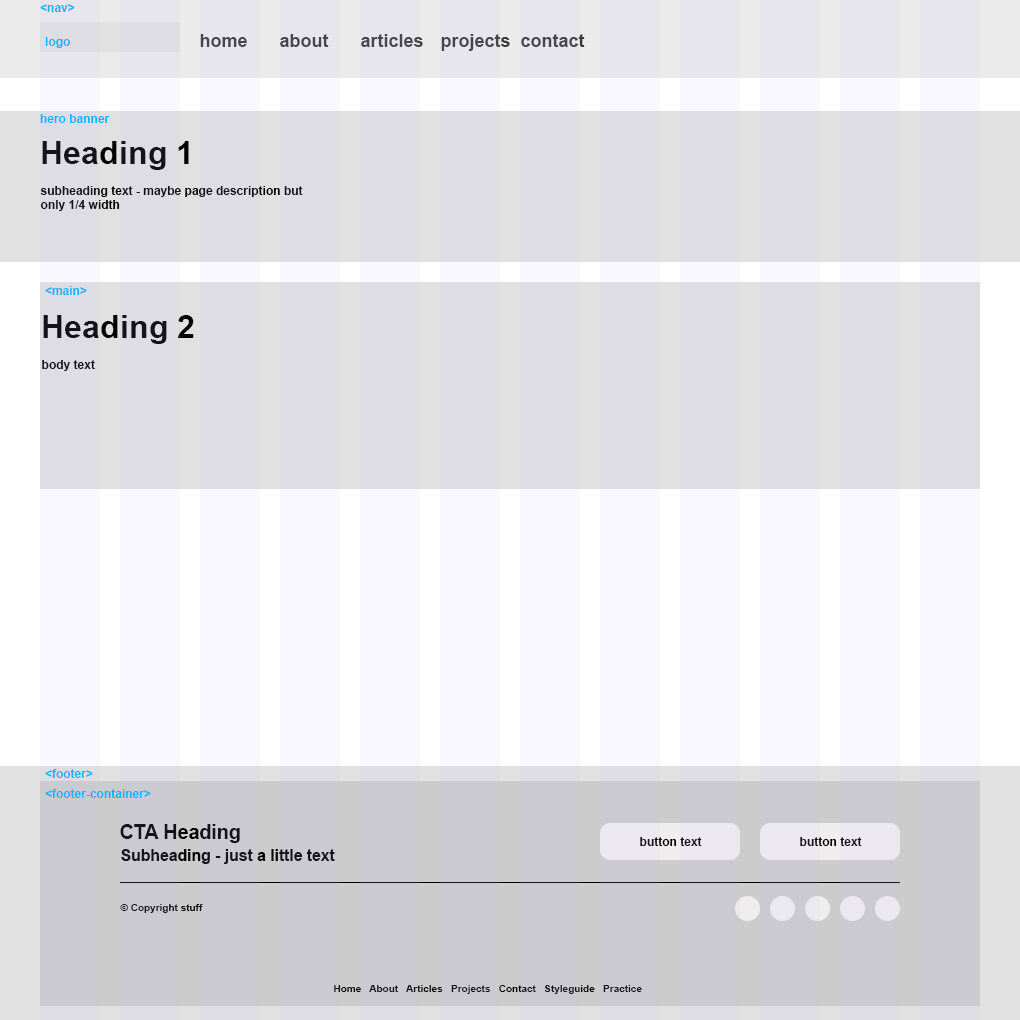
<style>
.page{position:relative;width:1020px;height:1020px;background:#dedde4}
.page>*{position:absolute;margin:0}
.t1{font:12px "Arial-BoldMT";color:#00b3fe}
.t2{font:18px "Arial-BoldMT";color:#393939}
.t3{font:32.3px "Arial-BoldMT";color:#14131a}
.t4{font:12px "Arial-BoldMT";color:#14131a}
.t5{font:19.7px "Arial-BoldMT";color:#14131a}
.t6{font:15.7px "Arial-BoldMT";color:#14131a}
.t7{font:10px "Arial-BoldMT";color:#14131a}
</style>
<div class="page">
<p class="t1" style="left:40px;top:4px;width:35px;height:8px">&lt;nav&gt;</p>
<p class="t1" style="left:45px;top:37px;width:25px;height:11px">logo</p>
<p class="t2" style="left:200px;top:34px;width:47px;height:13px">home</p>
<p class="t2" style="left:280px;top:34px;width:49px;height:13px">about</p>
<p class="t2" style="left:361px;top:34px;width:62px;height:13px">articles</p>
<p class="t2" style="left:441px;top:34px;width:69px;height:17px">projects</p>
<p class="t2" style="left:521px;top:34px;width:64px;height:13px">contact</p>
<p class="t1" style="left:40px;top:114px;width:70px;height:9px">hero banner</p>
<p class="t3" style="left:42px;top:141px;width:147px;height:29px">Heading 1</p>
<p class="t4" style="left:40px;top:186px;width:263px;height:25px">subheading text - maybe page description but <br>only 1/4 width</p>
<p class="t1" style="left:45px;top:286px;width:42px;height:9px">&lt;main&gt;</p>
<p class="t3" style="left:43px;top:315px;width:151px;height:29px">Heading 2</p>
<p class="t4" style="left:42px;top:360px;width:53px;height:11px">body text</p>
<p class="t1" style="left:45px;top:769px;width:48px;height:9px">&lt;footer&gt;</p>
<p class="t1" style="left:45px;top:789px;width:106px;height:9px">&lt;footer-container&gt;</p>
<p class="t5" style="left:120px;top:824px;width:120px;height:19px">CTA Heading</p>
<p class="t4" style="left:640px;top:837px;width:62px;height:9px">button text</p>
<p class="t4" style="left:800px;top:837px;width:62px;height:9px">button text</p>
<p class="t6" style="left:121px;top:849px;width:214px;height:15px">Subheading - just a little text</p>
<p class="t7" style="left:120px;top:904px;width:83px;height:9px">© Copyright stuff</p>
<p class="t7" style="left:334px;top:985px;width:308px;height:9px">Home   About   Articles   Projects   Contact   Styleguide   Practice</p>
</div>
